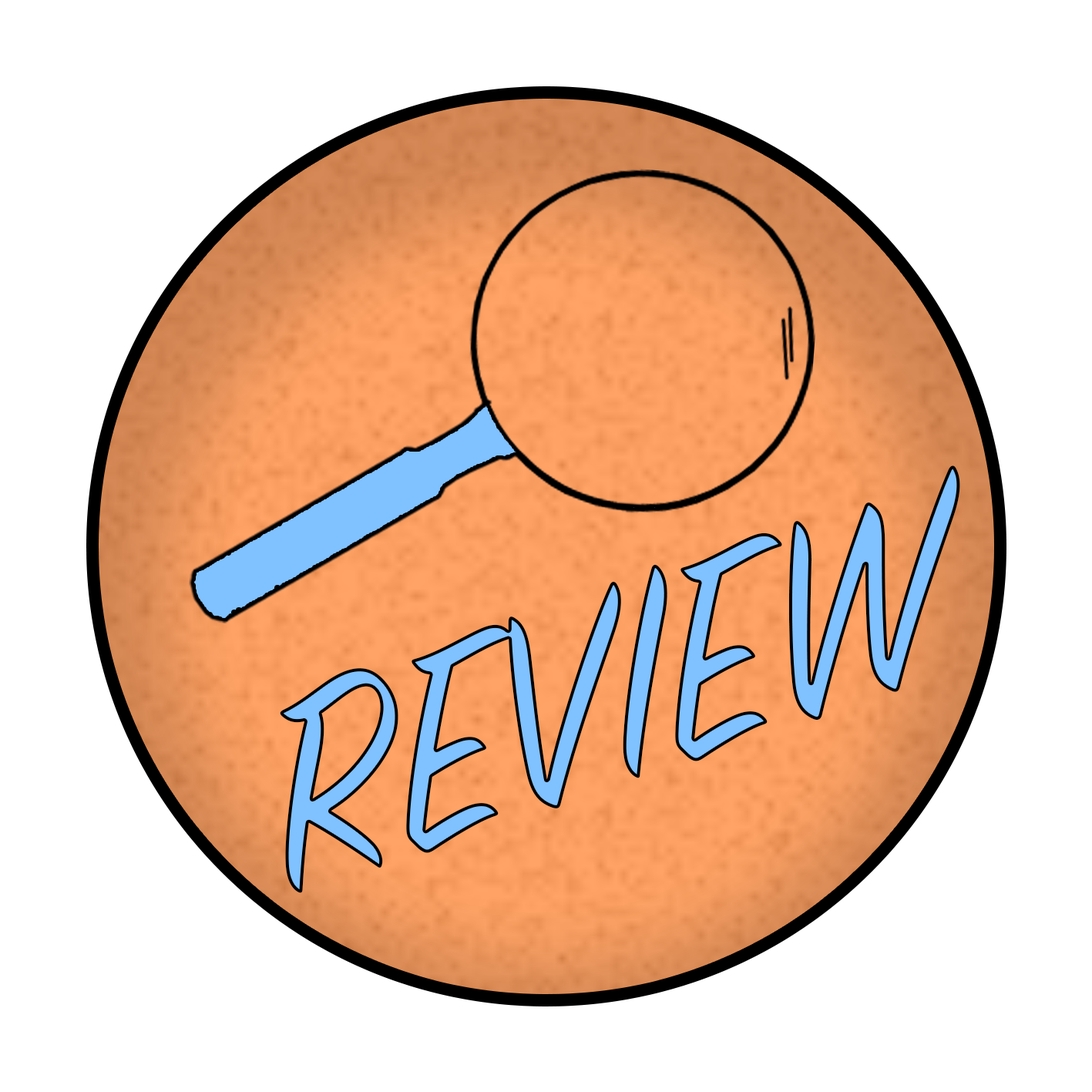
<style>
.page{position:relative;width:1092px;height:1092px;background:#ffffff}
.page>*{position:absolute;margin:0}
.t1{font:308.3px "SignPainter-HouseScript";color:#80c1ff}
</style>
<div class="page">
<p class="t1" style="left:280px;top:465px;width:680px;height:428px;rotate:-19deg">REVIEW</p>
</div>
